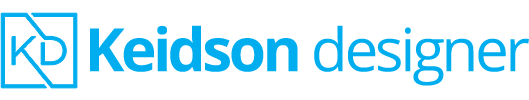
<style>
.page{position:relative;width:529px;height:100px;background:#ffffff}
.page>*{position:absolute;margin:0}
.t1{font:59.8px "OpenSans";letter-spacing:-0.06em;color:#00aeef}
.t2{font:59.8px "OpenSans-Bold";letter-spacing:-0.06em;color:#00aeef}
</style>
<div class="page">
<p class="t1" style="left:90px;top:25px;width:439px;height:61px"><span class="t2">Keidson </span>designer</p>
</div>
